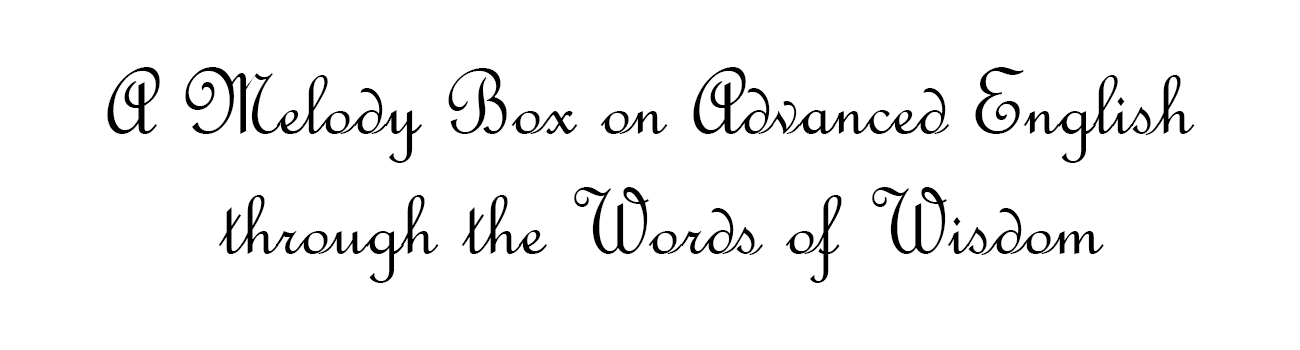
<style>
.page{position:relative;width:1300px;height:350px;background:#ffffff}
.page>*{position:absolute;margin:0}
.t1{font:100px "FrenchScriptMT";color:#000000}
</style>
<div class="page">
<p class="t1" style="left:107px;top:67px;width:1088px;height:216px;text-align:center">A Melody Box on Advanced English <br>through the Words of Wisdom</p>
</div>
